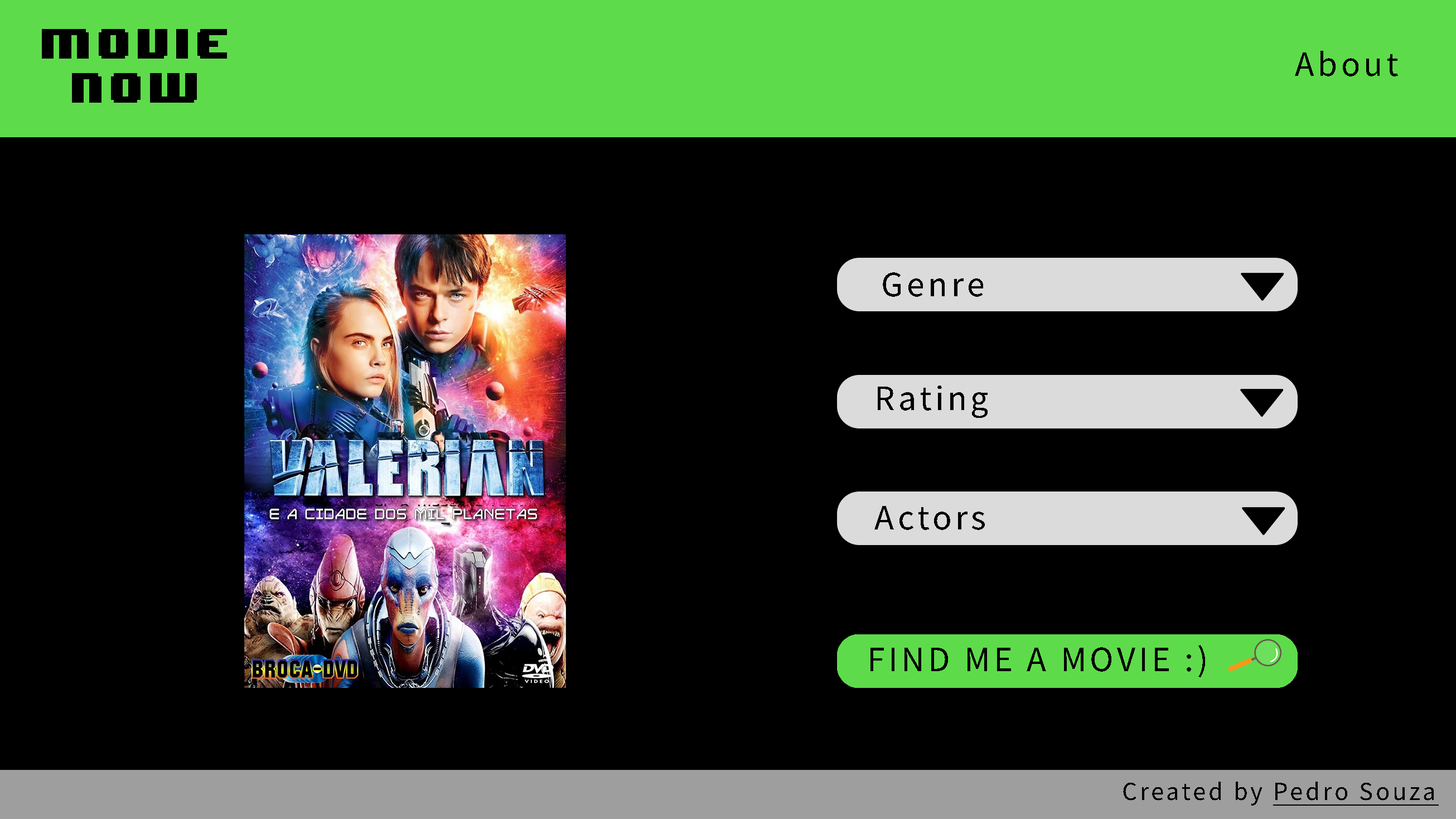
<style>
.page{position:relative;width:1456px;height:819px;background:#000000}
.page>*{position:absolute;margin:0}
.t1{font:35.4px/43.7px "8BITWONDERNominal";letter-spacing:0.1em;color:#000000}
.t2{font:35.4px "SourceSansRoman-Regular";letter-spacing:0.1em;color:#000000}
.t3{font:35.7px "SourceSansRoman-Regular";letter-spacing:0.1em;color:#000000}
.t4{font:35.7px "SourceSansRoman-Regular";letter-spacing:0.1em;color:#000000;text-transform:uppercase}
.t5{font:26.2px "SourceSansRoman-Regular";letter-spacing:0.1em;color:#000000;text-decoration:underline}
.t6{font:26.2px "SourceSansRoman-Regular";letter-spacing:0.1em;color:#000000}
</style>
<div class="page">
<p class="t1" style="left:42px;top:29px;width:185px;height:74px;text-align:center">MOVIE NOW</p>
<p class="t2" style="left:1295px;top:51px;width:103px;height:25px">About</p>
<p class="t3" style="left:883px;top:272px;width:100px;height:25px">Genre</p>
<p class="t3" style="left:878px;top:385px;width:110px;height:33px">Rating</p>
<p class="t3" style="left:875px;top:506px;width:110px;height:24px">Actors</p>
<p class="t4" style="left:871px;top:645px;width:334px;height:32px">Find me a movie :)</p>
<p class="t5" style="left:1123px;top:781px;width:316px;height:24px"><span class="t6">Created by </span>Pedro Souza</p>
</div>
